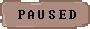
<style>
.page{position:relative;width:90px;height:29px;background:#ab8c7f}
.page>*{position:absolute;margin:0}
.t1{font:13px "Terminal";letter-spacing:0.04em;color:#000000}
</style>
<div class="page">
<p class="t1" style="left:18px;top:10px;width:58px;height:9px">PAUSED</p>
</div>
